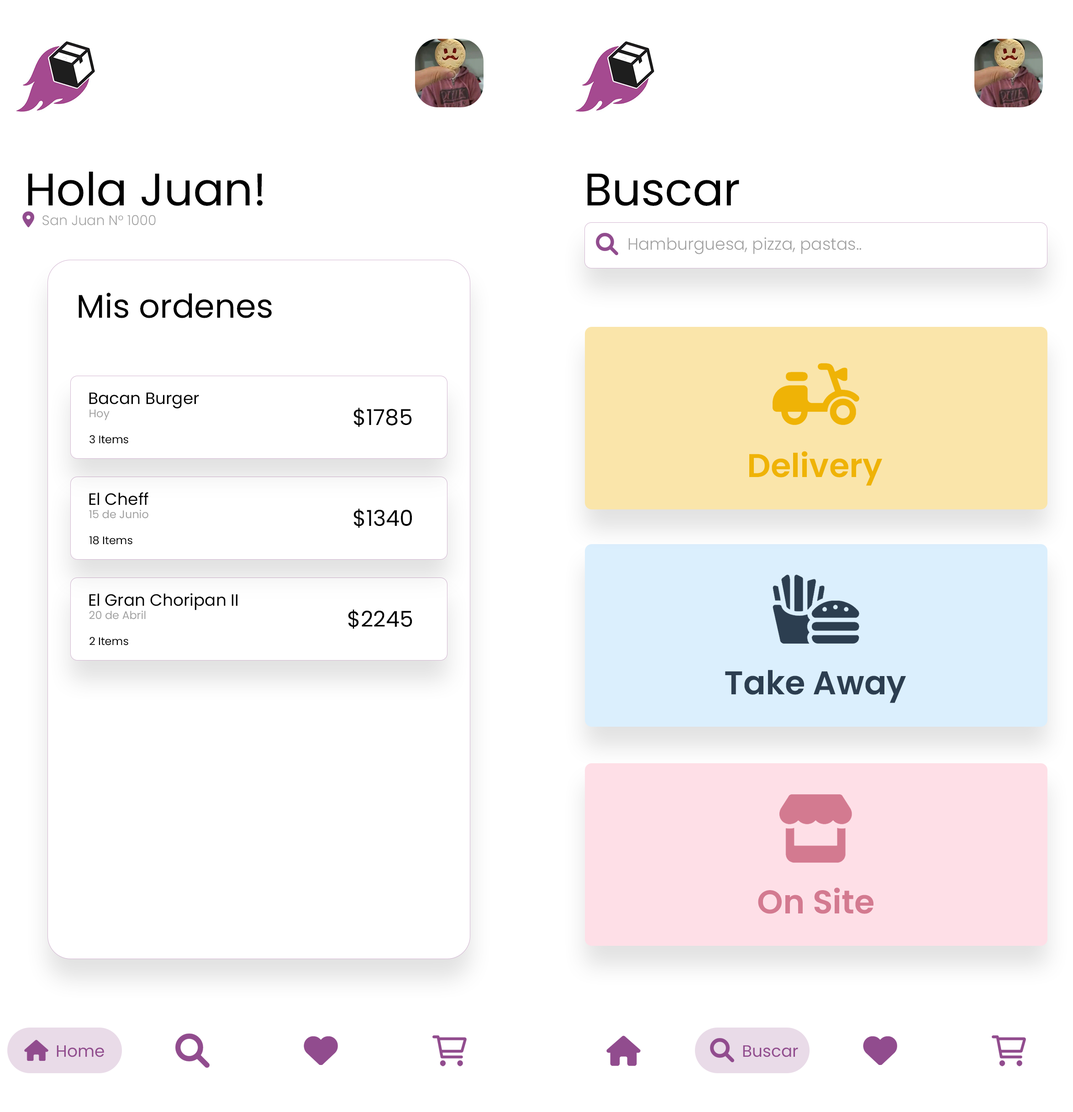
<style>
.page{position:relative;width:1073px;height:1112px;background:#ffffff}
.page>*{position:absolute;margin:0}
.t1{font:45.6px "Poppins-Regular";color:#000000}
.t2{font:13.7px "Poppins-Light";color:#a1a1a1}
.t3{font:16.4px "Poppins-Light";color:#a1a1a1}
.t4{font:32.9px "Poppins-Regular";color:#000000}
.t5{font:16.4px "Poppins-Regular";color:#000000}
.t6{font:11px "Poppins-Regular";color:#a1a1a1}
.t7{font:21.9px "Poppins-Regular";color:#000000}
.t8{font:11px "Poppins-Regular";color:#000000}
.t9{font:32.9px "Poppins-SemiBold";color:#efb306}
.t10{font:32.9px "Poppins-SemiBold";color:#2c3e50}
.t11{font:32.9px "Poppins-SemiBold";color:#d37a90}
.t12{font:16.4px "Poppins-Regular";color:#914c8e}
</style>
<div class="page">
<p class="t1" style="left:28px;top:172px;width:234px;height:34px">Hola Juan!</p>
<p class="t1" style="left:587px;top:173px;width:152px;height:33px">Buscar</p>
<p class="t2" style="left:42px;top:215px;width:114px;height:10px">San Juan N° 1000</p>
<p class="t3" style="left:628px;top:237px;width:233px;height:17px">Hamburguesa, pizza, pastas..</p>
<p class="t4" style="left:79px;top:293px;width:193px;height:25px">Mis ordenes</p>
<p class="t5" style="left:89px;top:393px;width:110px;height:15px">Bacan Burger</p>
<p class="t6" style="left:89px;top:409px;width:21px;height:11px">Hoy</p>
<p class="t7" style="left:354px;top:408px;width:58px;height:19px">$1785</p>
<p class="t8" style="left:89px;top:435px;width:39px;height:9px">3 Items</p>
<p class="t9" style="left:749px;top:451px;width:133px;height:35px">Delivery</p>
<p class="t5" style="left:89px;top:492px;width:59px;height:13px">El Cheff</p>
<p class="t6" style="left:89px;top:509px;width:59px;height:9px">15 de Junio</p>
<p class="t7" style="left:354px;top:508px;width:58px;height:20px">$1340</p>
<p class="t8" style="left:89px;top:536px;width:43px;height:8px">18 Items</p>
<p class="t5" style="left:89px;top:593px;width:148px;height:17px">El Gran Choripan II</p>
<p class="t6" style="left:89px;top:610px;width:57px;height:9px">20 de Abril</p>
<p class="t7" style="left:348px;top:609px;width:64px;height:20px">$2245</p>
<p class="t8" style="left:89px;top:637px;width:39px;height:8px">2 Items</p>
<p class="t10" style="left:725px;top:670px;width:180px;height:33px">Take Away</p>
<p class="t11" style="left:758px;top:887px;width:115px;height:27px">On Site</p>
<p class="t12" style="left:57px;top:1045px;width:47px;height:12px">Home</p>
<p class="t12" style="left:743px;top:1045px;width:55px;height:12px">Buscar</p>
</div>
